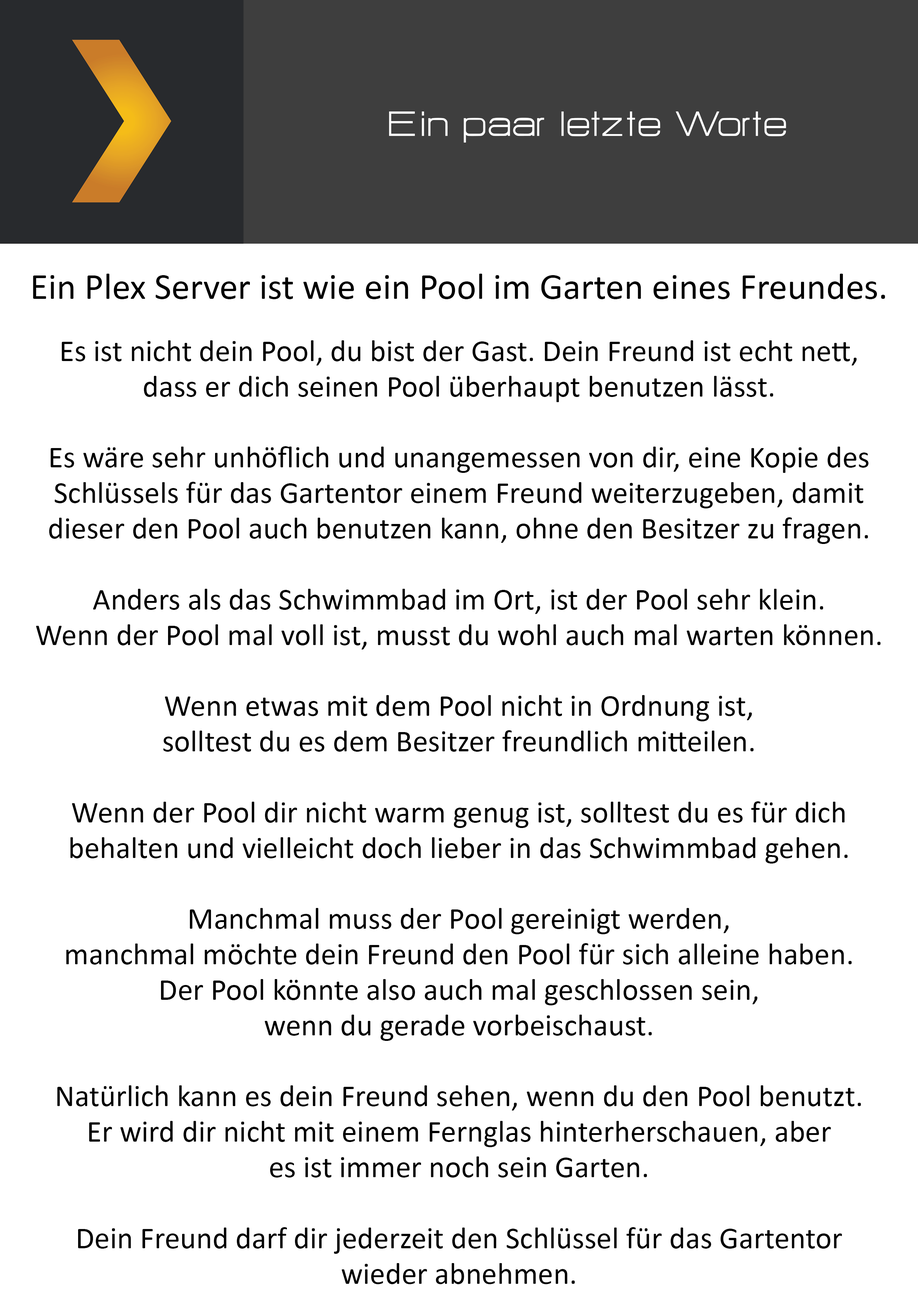
<style>
.page{position:relative;width:918px;height:1299px;background:#ffffff}
.page>*{position:absolute;margin:0}
.t1{font:43.2px "HURTMOLDPersonalUse-Regular";color:#ffffff}
.t2{font:37px "Calibri";color:#000000}
.t3{font:30.9px/35.5px "Calibri";color:#000000}
</style>
<div class="page">
<p class="t1" style="left:389px;top:111px;width:397px;height:32px">Ein paar letzte Worte</p>
<p class="t2" style="left:33px;top:274px;width:852px;height:25px">Ein Plex Server ist wie ein Pool im Garten eines Freundes.</p>
<p class="t3" style="left:36px;top:340px;width:845px;height:944px;text-align:center">Es ist nicht dein Pool, du bist der Gast. Dein Freund ist echt nett,<br>dass er dich seinen Pool überhaupt benutzen lässt.<br><br>Es wäre sehr unhöflich und unangemessen von dir, eine Kopie des<br>Schlüssels für das Gartentor einem Freund weiterzugeben, damit<br>dieser den Pool auch benutzen kann, ohne den Besitzer zu fragen.<br><br>Anders als das Schwimmbad im Ort, ist der Pool sehr klein.<br>Wenn der Pool mal voll ist, musst du wohl auch mal warten können.<br><br>Wenn etwas mit dem Pool nicht in Ordnung ist,<br>solltest du es dem Besitzer freundlich mitteilen.<br><br>Wenn der Pool dir nicht warm genug ist, solltest du es für dich<br>behalten und vielleicht doch lieber in das Schwimmbad gehen.<br><br>Manchmal muss der Pool gereinigt werden,<br>manchmal möchte dein Freund den Pool für sich alleine haben.<br>Der Pool könnte also auch mal geschlossen sein,<br>wenn du gerade vorbeischaust.<br><br>Natürlich kann es dein Freund sehen, wenn du den Pool benutzt.<br>Er wird dir nicht mit einem Fernglas hinterherschauen, aber<br>es ist immer noch sein Garten.<br><br>Dein Freund darf dir jederzeit den Schlüssel für das Gartentor<br>wieder abnehmen.</p>
</div>
